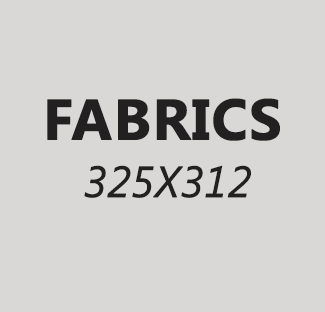
<style>
.page{position:relative;width:325px;height:312px;background:#dad7d7}
.page>*{position:absolute;margin:0}
.t1{font:57.2px "SegoeUI-Bold";color:#222020;text-transform:uppercase;font-weight:bold}
.t2{font:43.6px "SegoeUI-Italic";color:#222020;text-transform:uppercase;font-weight:bold;scale:0.96 1}
</style>
<div class="page">
<p class="t1" style="left:47px;top:98px;width:233px;height:43px">FABRICS</p>
<p class="t2" style="left:84px;top:165px;width:167px;height:33px">325x312</p>
</div>
